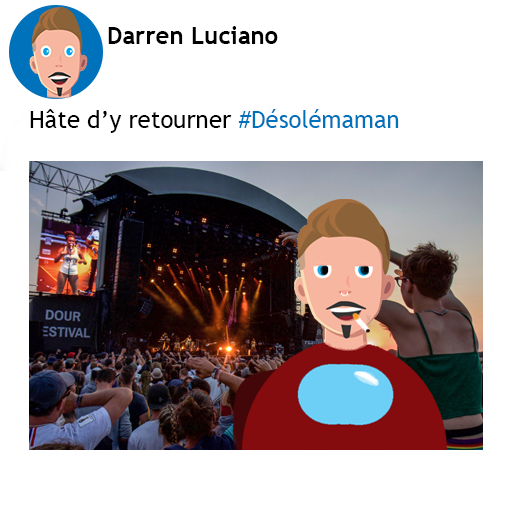
<style>
.page{position:relative;width:512px;height:512px;background:#ffffff}
.page>*{position:absolute;margin:0}
.t1{font:24px "TrebuchetMS-Bold";color:#000000}
.t2{font:24px "TrebuchetMS";color:#000000}
.t3{font:24px "TrebuchetMS";color:#0072bc}
</style>
<div class="page">
<p class="t1" style="left:108px;top:26px;width:170px;height:18px">Darren Luciano</p>
<p class="t2" style="left:30px;top:109px;width:369px;height:24px">Hâte d’y retourner <span class="t3">#Désolémaman</span></p>
</div>
